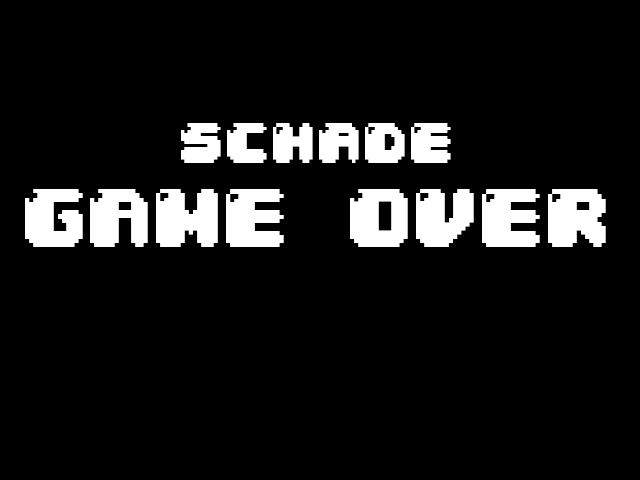
<style>
.page{position:relative;width:640px;height:480px;background:#000000}
.page>*{position:absolute;margin:0}
.t1{font:70px "04b30";color:#ffffff}
.t2{font:56px "04b30";color:#ffffff}
</style>
<div class="page">
<p class="t1" style="left:25px;top:123px;width:581px;height:124px;text-align:center"><span class="t2">schade<br></span>GAME OVER</p>
</div>
